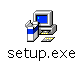
<style>
.page{position:relative;width:80px;height:80px;background:#ffffff}
.page>*{position:absolute;margin:0}
.t1{font:14px "MSReferenceSansSerif";color:#000000}
</style>
<div class="page">
<p class="t1" style="left:8px;top:48px;width:67px;height:13px">setup.exe</p>
</div>
